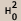
<style>
.page{position:relative;width:21px;height:21px;background:#d9cdc1}
.page>*{position:absolute;margin:0}
.t1{font:9px "Tahoma";color:#000000}
.t2{font:9px "Tahoma"}
</style>
<div class="page">
<p class="t1" style="left:12px;top:1px;width:5px;height:7px">2</p>
<p class="t1" style="left:5px;top:7px;width:6px;height:7px">H</p>
<p class="t2" style="left:12px;top:13px;width:5px;height:8px">0</p>
</div>
